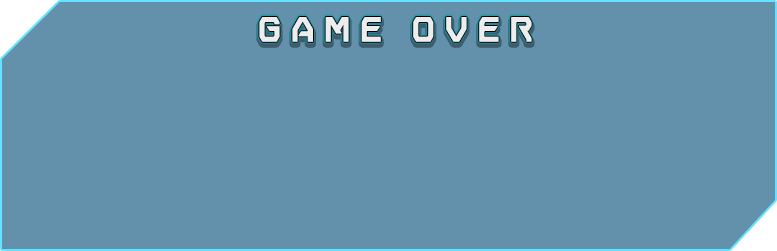
<style>
.page{position:relative;width:777px;height:251px;background:#6391ab}
.page>*{position:absolute;margin:0}
.t1{font:33.5px "VoyagerGrotesqueBold";letter-spacing:0.3em;color:#ffffff}
</style>
<div class="page">
<p class="t1" style="left:259px;top:17px;width:273px;height:25px">GAME OVER</p>
</div>
